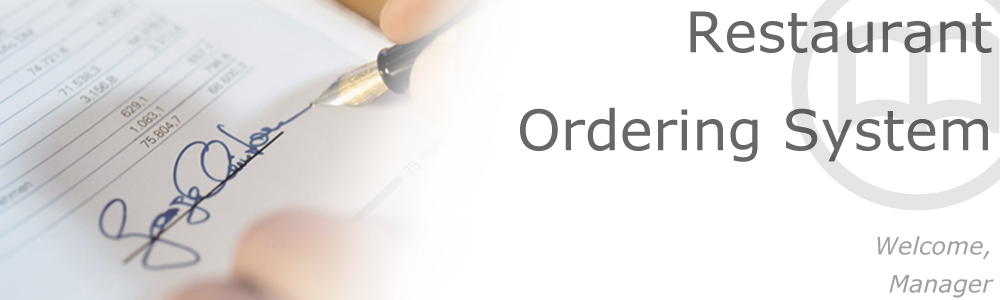
<style>
.page{position:relative;width:1000px;height:300px;background:#ffffff}
.page>*{position:absolute;margin:0}
.t1{font:56px "Verdana";color:#676767}
.t2{font:24px/38px "Verdana-Italic";color:#a0a0a0}
</style>
<div class="page">
<p class="t1" style="left:520px;top:11px;width:472px;height:151px;text-align:right">Restaurant <br>Ordering System</p>
<p class="t2" style="left:877px;top:236px;width:117px;height:62px;text-align:right">Welcome,<br>Manager</p>
</div>
